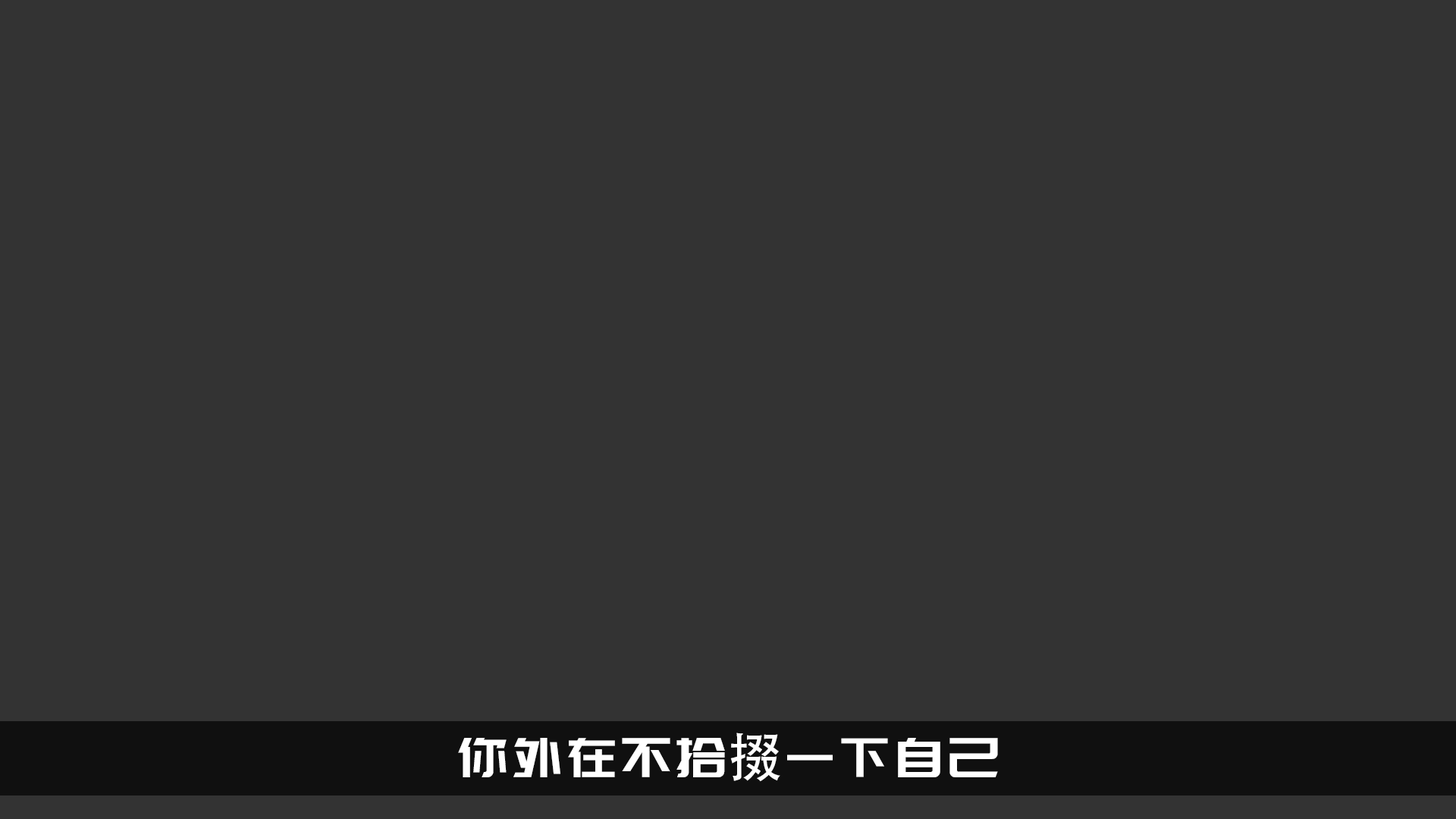
<style>
.page{position:relative;width:1456px;height:819px;background:#333333}
.page>*{position:absolute;margin:0}
.t1{font:54.6px "PangMenZhengDao-3";color:#ffffff}
.t2{font:54.6px "AdobeHeitiStd-Regular";color:#ffffff}
</style>
<div class="page">
<p class="t1" style="left:458px;top:733px;width:540px;height:49px">你外在不拾<span class="t2">掇</span>一下自己</p>
</div>
